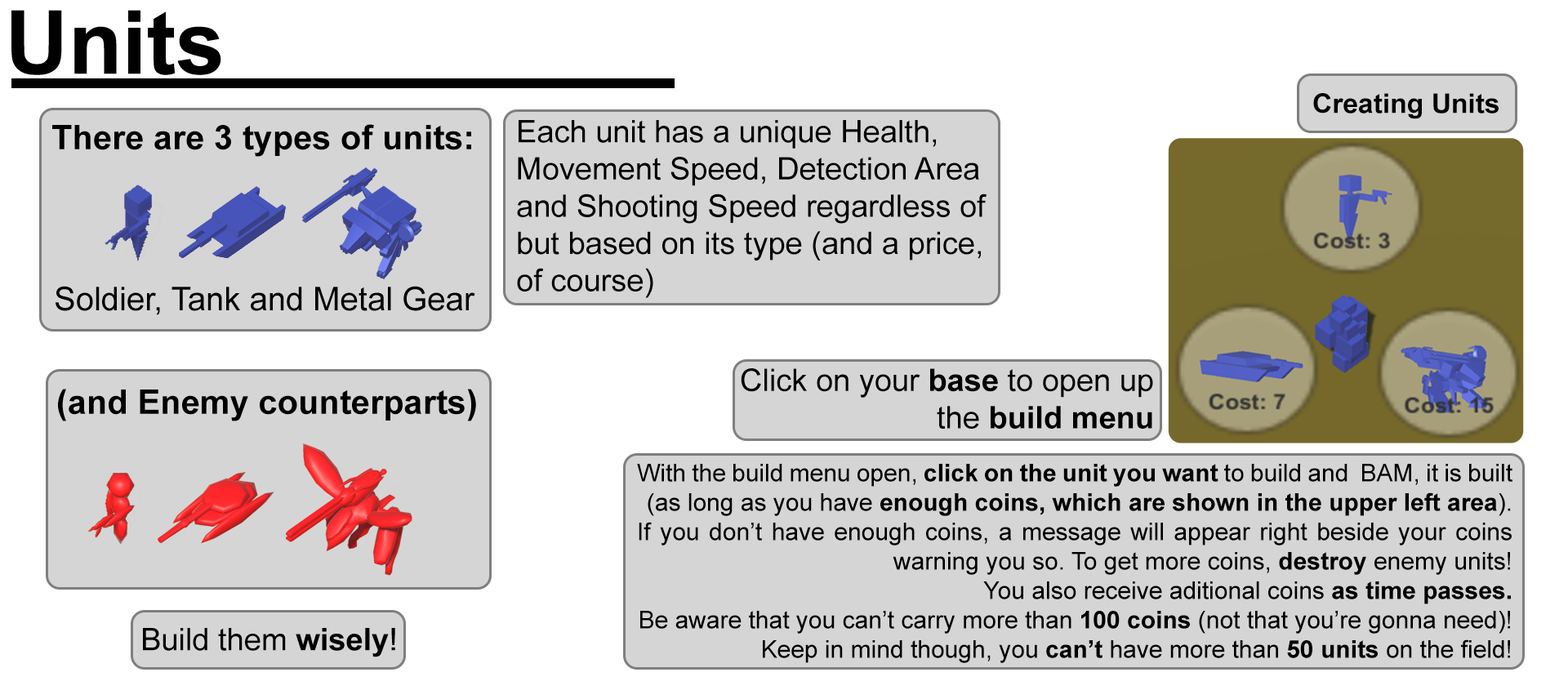
<style>
.page{position:relative;width:1568px;height:699px;background:#ffffff}
.page>*{position:absolute;margin:0}
.t1{font:87.9px "Arial-BoldMT";color:#000000}
.t2{font:26.9px "Arial-BoldMT";color:#000000}
.t3{font:33.8px "Arial-BoldMT";color:#000000}
.t4{font:31px "ArialMT";color:#000000}
.t5{font:32.7px "ArialMT";color:#000000}
.t6{font:31px "Arial-BoldMT";color:#000000}
.t7{font:24.5px "ArialMT";color:#000000}
.t8{font:24.5px "Arial-BoldMT";color:#000000}
</style>
<div class="page">
<p class="t1" style="left:11px;top:10px;width:210px;height:65px">Units</p>
<p class="t2" style="left:1313px;top:93px;width:186px;height:26px">Creating Units</p>
<p class="t3" style="left:52px;top:124px;width:419px;height:33px">There are 3 types of units:</p>
<p class="t4" style="left:517px;top:120px;width:470px;height:178px">Each unit has a unique Health, Movement Speed, Detection Area and Shooting Speed regardless of but based on its type (and a price, of course)</p>
<p class="t5" style="left:56px;top:286px;width:419px;height:29px">Soldier, Tank and Metal Gear</p>
<p class="t4" style="left:741px;top:368px;width:412px;height:61px;text-align:right">Click on your <span class="t6">base</span> to open up the <span class="t6">build menu</span></p>
<p class="t3" style="left:58px;top:389px;width:418px;height:32px">(and Enemy counterparts)</p>
<p class="t7" style="left:637px;top:464px;width:875px;height:199px;text-align:justify">With the build menu open, <span class="t8">click on the unit you want</span> to build and  BAM, it is built (as long as you have <span class="t8">enough coins, which are shown in the upper left area</span>).<br>If you don’t have enough coins, a message will appear right beside your coins warning you so. To get more coins, <span class="t8">destroy</span> enemy units!<br>You also receive aditional coins <span class="t8">as time passes.</span><br>Be aware that you can’t carry more than <span class="t8">100 coins</span> (not that you’re gonna need)!<br>Keep in mind though, you <span class="t8">can’t</span> have more than <span class="t8">50 units</span> on the field!</p>
<p class="t4" style="left:143px;top:628px;width:252px;height:29px">Build them <span class="t6">wisely</span>!</p>
</div>
